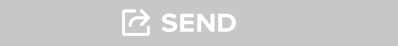
<style>
.page{position:relative;width:398px;height:46px;background:#c7c7c7}
.page>*{position:absolute;margin:0}
.t1{font:27px "ProximaNova-Bold";color:#ffffff;scale:1.07 1}
</style>
<div class="page">
<p class="t1" style="left:161px;top:13px;width:75px;height:19px">SEND</p>
</div>
